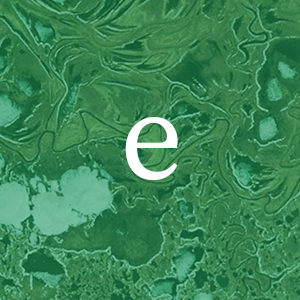
<style>
.page{position:relative;width:300px;height:300px}
.page>*{position:absolute;margin:0}
.t1{font:125px "SourceSerifPro-Regular";color:#ffffff}
</style>
<div class="page">
<p class="t1" style="left:125px;top:117px;width:53px;height:64px">e</p>
</div>
